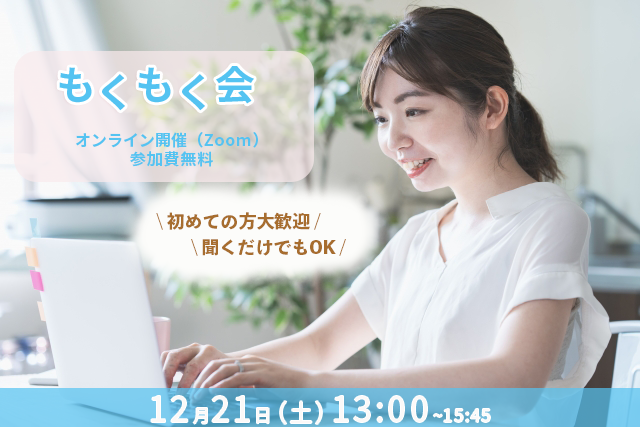
<style>
.page{position:relative;width:640px;height:427px}
.page>*{position:absolute;margin:0}
.t1{font:40px "SourceHanSans-Bold";color:#54c3f1}
.t2{font:16px "SourceHanSans-Bold";letter-spacing:0.05em;color:#54c3f1}
.t3{font:16px "SourceHanSans-Bold";color:#54c3f1}
.t4{font:18px "Toppan-BunkyuMidashiGoStdN-EB";color:#a76d2e}
.t5{font:18px "SourceHanSans-Regular";letter-spacing:0.1em;color:#fbf9f8;scale:0.95 1}
.t6{font:36px "SourceHanSans-Regular";letter-spacing:0.1em;color:#fbf9f8;scale:0.95 1}
.t7{font:24px "SourceHanSans-Regular";letter-spacing:0.1em;color:#fbf9f8;scale:0.95 1}
</style>
<div class="page">
<p class="t1" style="left:59px;top:67px;width:33px;height:36px">も</p>
<p class="t1" style="left:102px;top:74px;width:23px;height:37px">く</p>
<p class="t1" style="left:138px;top:67px;width:33px;height:36px">も</p>
<p class="t1" style="left:182px;top:74px;width:23px;height:37px">く</p>
<p class="t1" style="left:216px;top:66px;width:38px;height:38px">会</p>
<p class="t2" style="left:76px;top:132px;width:182px;height:35px;text-align:center"><span class="t3">オンライン開催</span>（Zoom）<br>参加費無料</p>
<p class="t4" style="left:156px;top:212px;width:165px;height:18px">\ 初めての方大歓迎 /</p>
<p class="t4" style="left:191px;top:239px;width:155px;height:17px">\ 聞くだけでもOK /</p>
<p class="t5" style="left:151px;top:396px;width:339px;height:28px"><span class="t6">12</span>月<span class="t6">21</span>日<span class="t7">（土）</span><span class="t6">13:00</span>~15:45</p>
</div>
